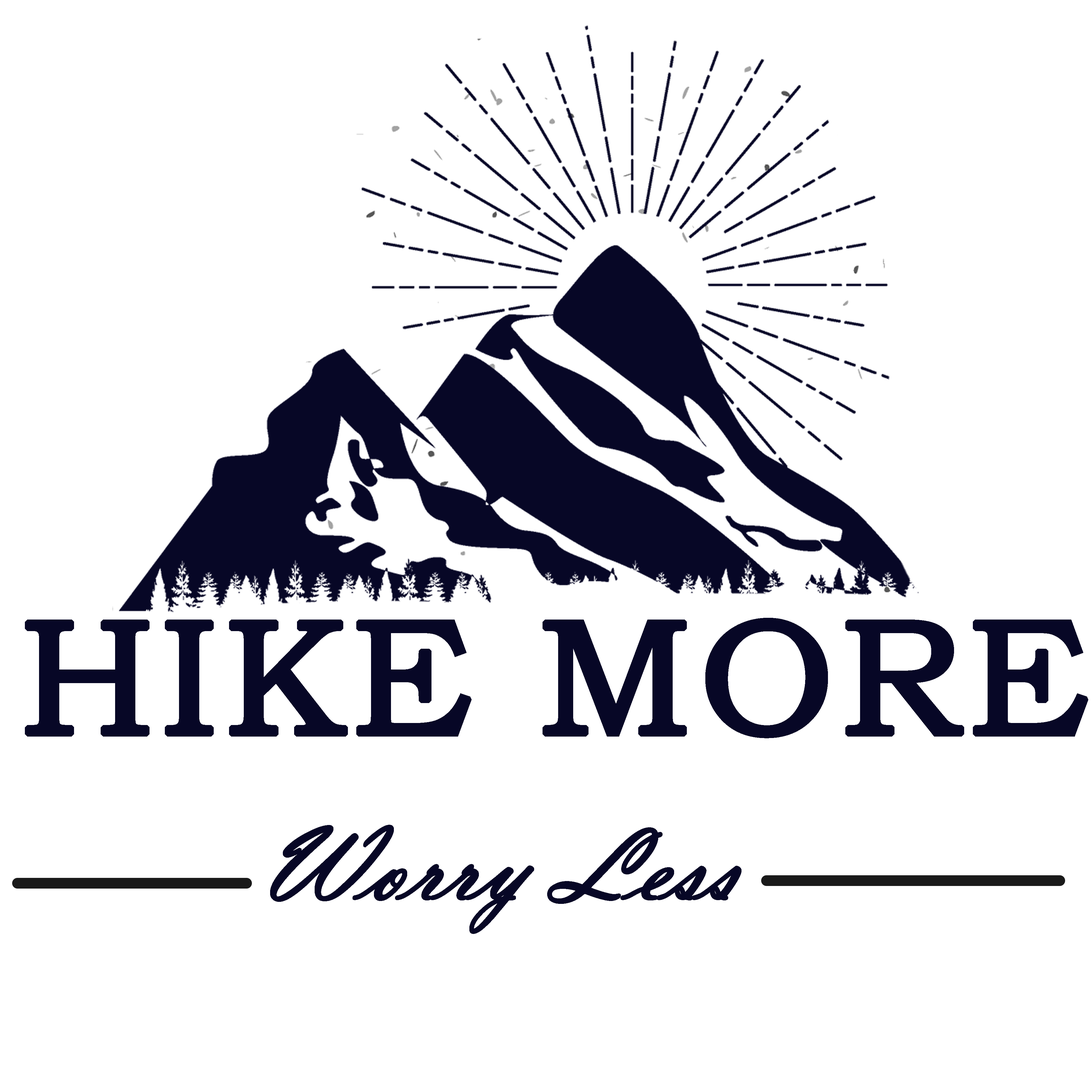
<style>
.page{position:relative;width:1092px;height:1092px;background:#ffffff}
.page>*{position:absolute;margin:0}
.t1{font:164.8px "BookmanOldStyle";letter-spacing:0.001em;color:#070726;font-weight:bold;scale:1.03 1}
.t2{font:108.7px "VladimirScript";letter-spacing:0.001em;color:#070726;font-weight:bold;scale:1.03 1}
</style>
<div class="page">
<p class="t1" style="left:25px;top:618px;width:1063px;height:121px">HIKE MORE</p>
<p class="t2" style="left:270px;top:825px;width:471px;height:109px">Worry Less</p>
</div>
